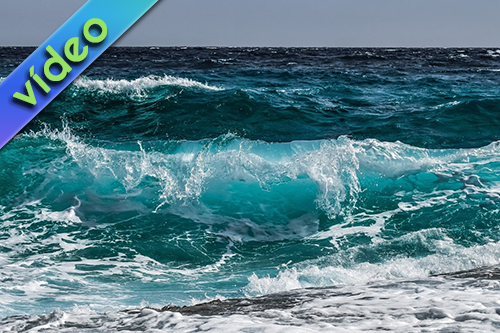
<style>
.page{position:relative;width:500px;height:333px}
.page>*{position:absolute;margin:0}
.t1{font:41.7px "CaviarDreams-Bold";letter-spacing:-0.015em;color:#98e261;font-weight:bold}
</style>
<div class="page">
<p class="t1" style="left:13px;top:18px;width:94px;height:87px;rotate:-44deg">vídeo</p>
</div>
